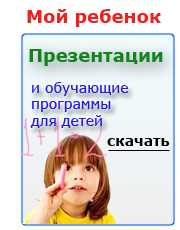
<style>
.page{position:relative;width:180px;height:230px;background:#ffffff}
.page>*{position:absolute;margin:0}
.t1{font:18px "Verdana-Bold";color:#f31e1e}
.t2{font:18px "Verdana-Bold";color:#118519}
.t3{font:14px "Verdana";color:#1f1aec}
.t4{font:18px "Verdana-Bold";color:#1f1aec}
.t5{font:14px "Verdana-Bold";color:#030303}
</style>
<div class="page">
<p class="t1" style="left:27px;top:9px;width:134px;height:18px">Мой ребенок</p>
<p class="t2" style="left:29px;top:49px;width:134px;height:17px">Презентации</p>
<p class="t3" style="left:30px;top:82px;width:99px;height:46px"><span class="t4"><br><br></span>и обучающие <br>программы<br>для детей</p>
<p class="t5" style="left:107px;top:138px;width:63px;height:8px">скачать</p>
</div>
